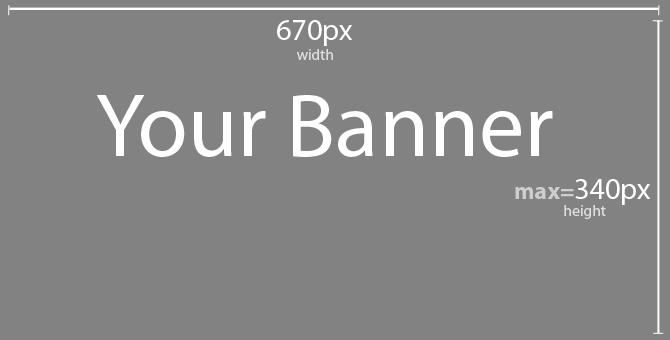
<style>
.page{position:relative;width:670px;height:340px;background:#828282}
.page>*{position:absolute;margin:0}
.t1{font:30px "MyriadPro-Regular";color:#ffffff}
.t2{font:15.5px "MyriadPro-Regular";color:#dfdfdf}
.t3{font:90.3px "MyriadPro-Regular";color:#ffffff}
.t4{font:24px "MyriadPro-Bold";color:#cecece}
</style>
<div class="page">
<p class="t1" style="left:277px;top:20px;width:76px;height:26px">670px</p>
<p class="t2" style="left:297px;top:49px;width:36px;height:11px">width</p>
<p class="t3" style="left:96px;top:95px;width:457px;height:62px">Your Banner</p>
<p class="t1" style="left:515px;top:179px;width:136px;height:26px"><span class="t4">max=</span>340px</p>
<p class="t2" style="left:564px;top:205px;width:42px;height:14px">height</p>
</div>
